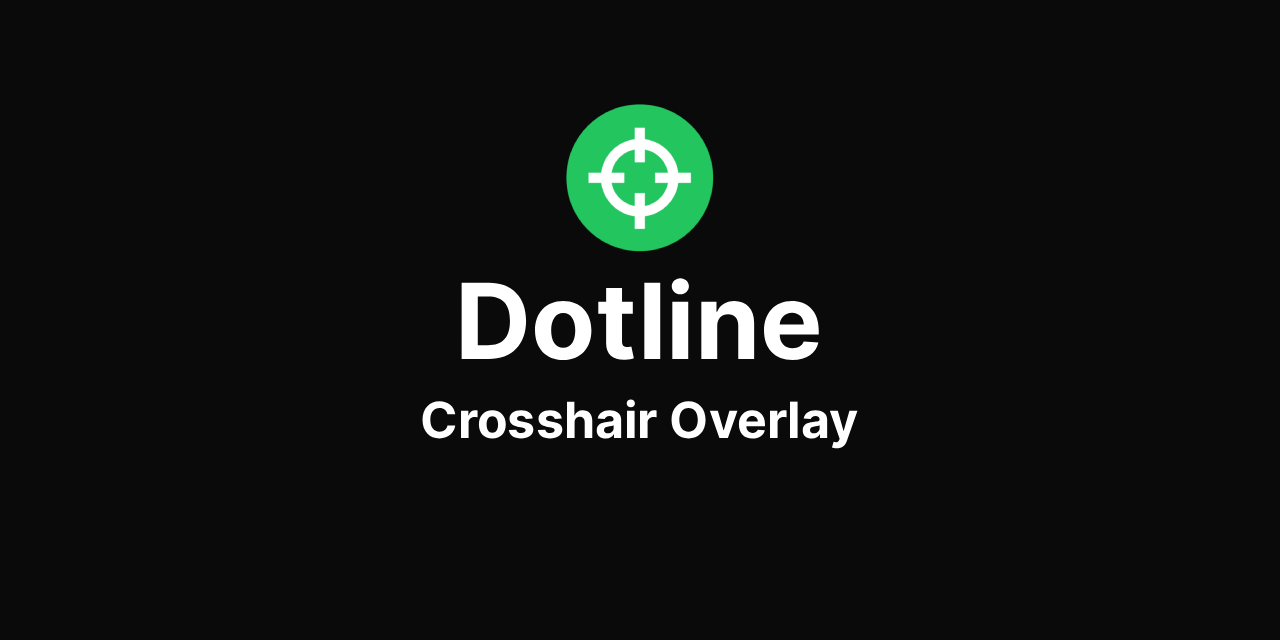
<style>
.page{position:relative;width:1280px;height:640px;background:#0a0a0a}
.page>*{position:absolute;margin:0}
.t1{font:105px "Inter-Bold";color:#ffffff}
.t2{font:50px "Inter-Bold";color:#ffffff}
</style>
<div class="page">
<p class="t1" style="left:461px;top:278px;width:358px;height:82px">Dotline</p>
<p class="t2" style="left:422px;top:399px;width:436px;height:50px">Crosshair Overlay</p>
</div>
